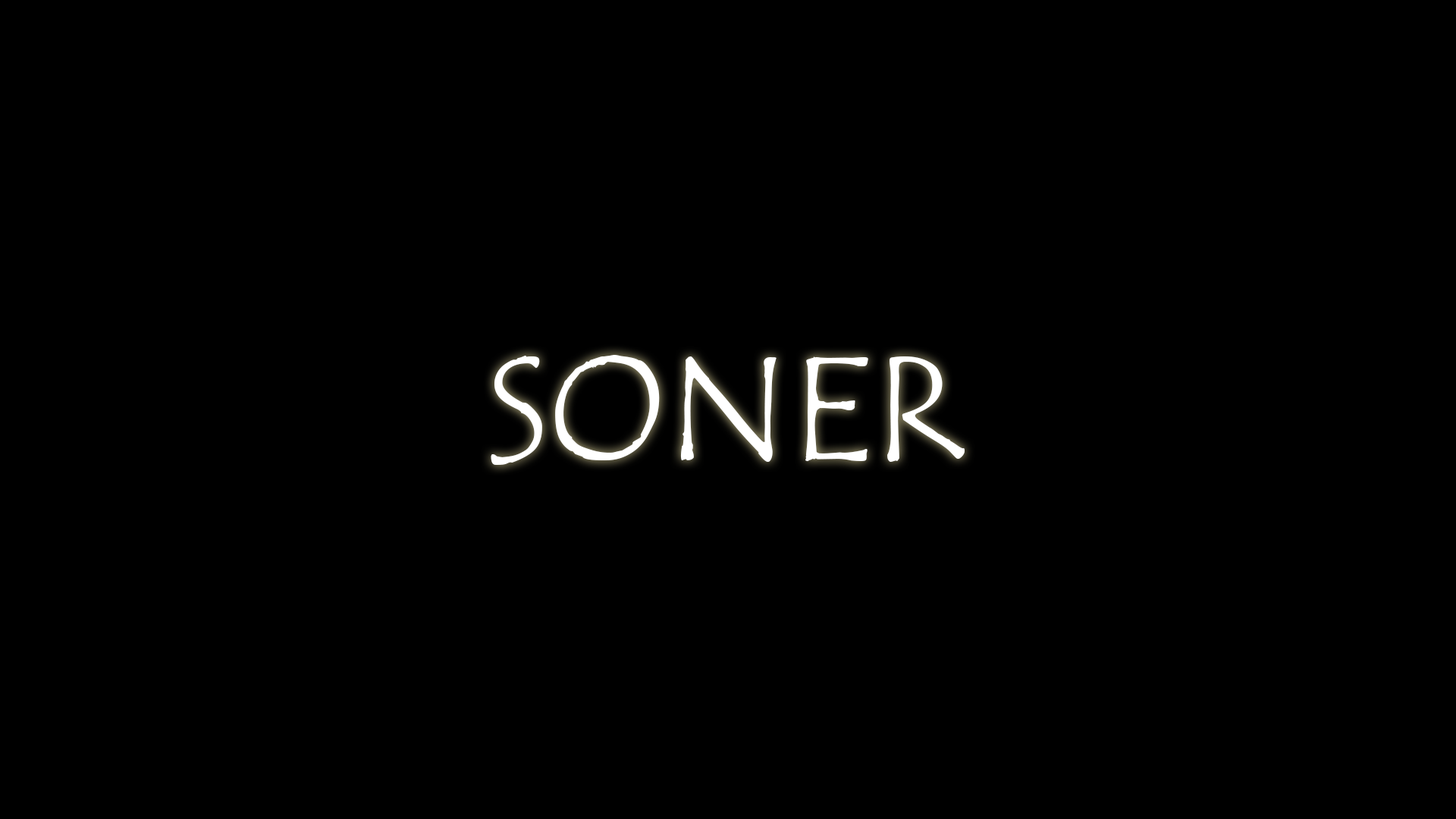
<style>
.page{position:relative;width:1456px;height:819px;background:#000000}
.page>*{position:absolute;margin:0}
.t1{font:151.7px "TempusSansITC";color:#ffffff}
</style>
<div class="page">
<p class="t1" style="left:491px;top:355px;width:474px;height:110px">SONER</p>
</div>
